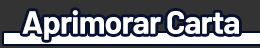
<style>
.page{position:relative;width:260px;height:48px;background:#333333}
.page>*{position:absolute;margin:0}
.t1{font:32px "Barlow-Bold";letter-spacing:-0.025em;color:#ffffff}
</style>
<div class="page">
<p class="t1" style="left:22px;top:10px;width:217px;height:30px">Aprimorar Carta</p>
</div>
